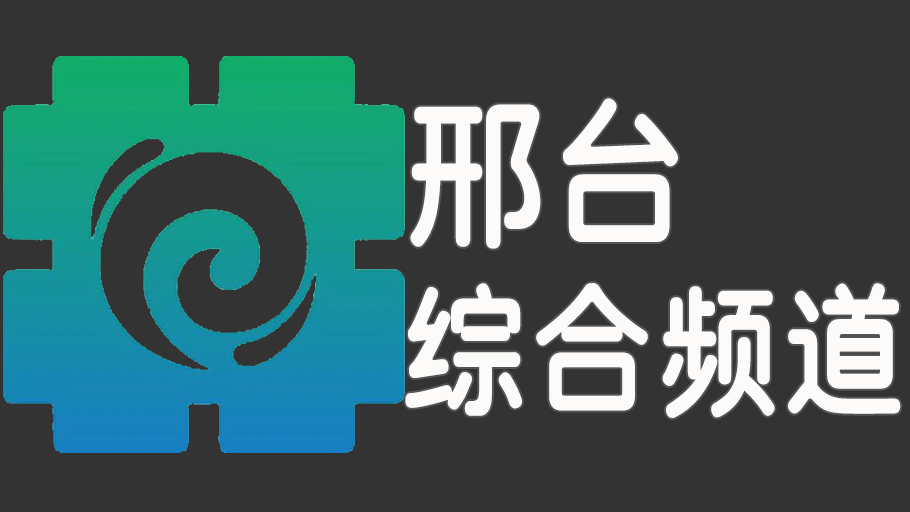
<style>
.page{position:relative;width:910px;height:512px;background:#333333}
.page>*{position:absolute;margin:0}
.t1{font:145.8px/187.5px "SJyuantijian-C-Regular";letter-spacing:0.02em;color:#fcfbf9;scale:0.85 1}
.t2{font:166.7px/187.5px "SJyuantijian-C-Regular";letter-spacing:0.02em;color:#fcfbf9;scale:0.85 1}
</style>
<div class="page">
<p class="t1" style="left:405px;top:98px;width:496px;height:320px"><span class="t2">邢台<br></span>综合频道</p>
</div>
